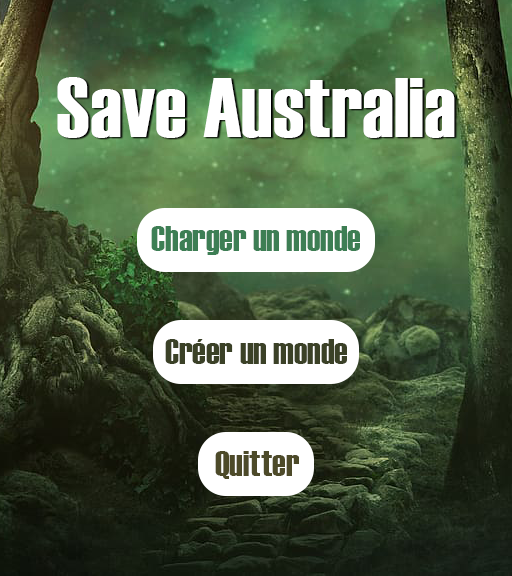
<style>
.page{position:relative;width:512px;height:576px}
.page>*{position:absolute;margin:0}
.t1{font:84px "Haettenschweiler";color:#ffffff;scale:1.05 1}
.t2{font:36px "Haettenschweiler";color:#3d7e54;scale:1.05 1}
.t3{font:36px "Haettenschweiler";color:#3b4127;scale:1.05 1}
.t4{font:36px "Haettenschweiler";color:#4d4a29;scale:1.05 1}
</style>
<div class="page">
<p class="t1" style="left:57px;top:77px;width:398px;height:61px">Save Australia</p>
<p class="t2" style="left:151px;top:226px;width:209px;height:29px">Charger un monde</p>
<p class="t3" style="left:165px;top:339px;width:182px;height:25px">Créer un monde</p>
<p class="t4" style="left:215px;top:451px;width:84px;height:28px">Quitter</p>
</div>
